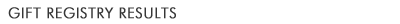
<style>
.page{position:relative;width:400px;height:24px;background:#ffffff}
.page>*{position:absolute;margin:0}
.t1{font:14.7px "FuturaBT-Light";letter-spacing:0.025em;color:#363636;text-transform:uppercase;font-weight:bold}
</style>
<div class="page">
<p class="t1" style="left:8px;top:7px;width:168px;height:12px">gift registry results</p>
</div>
